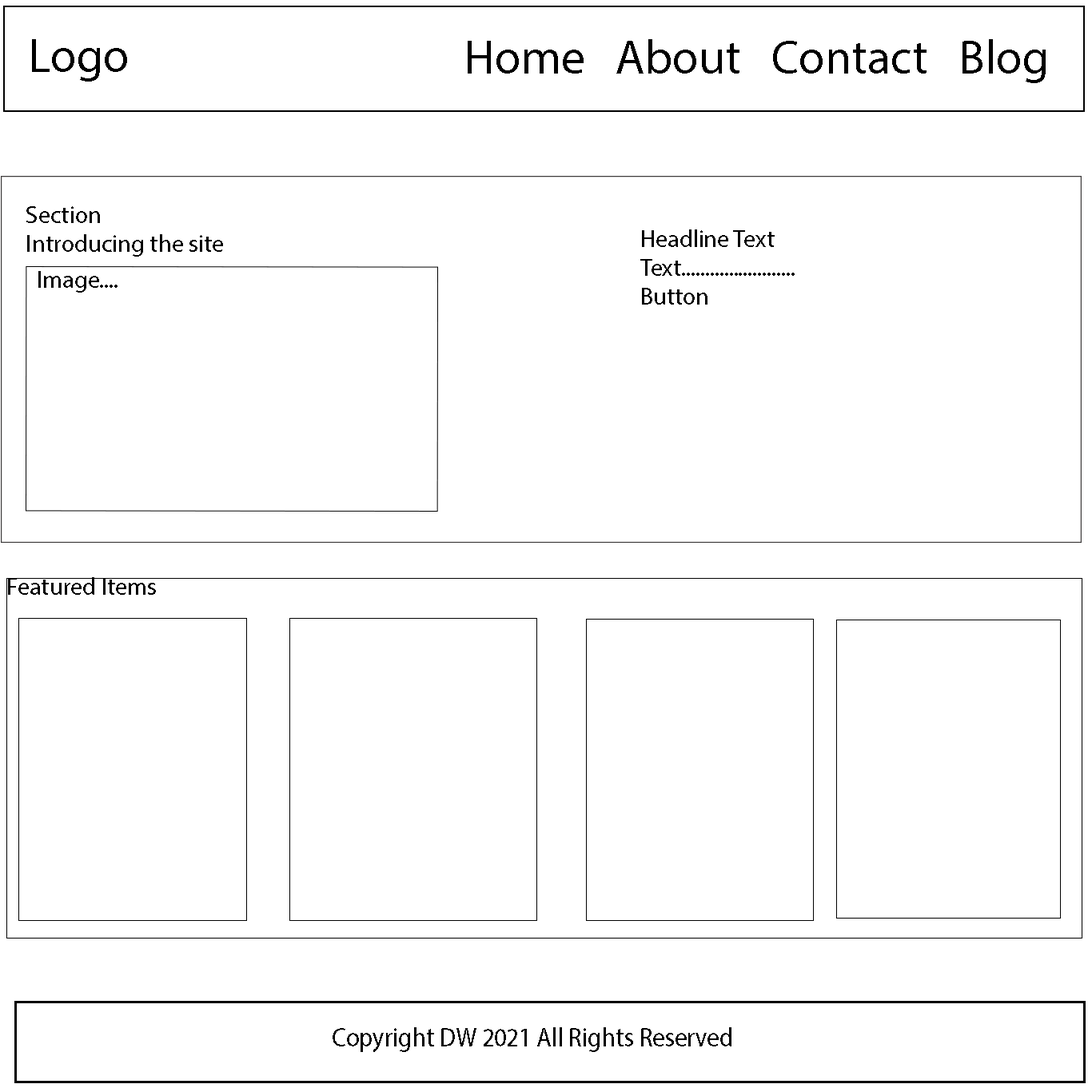
<style>
.page{position:relative;width:1092px;height:1092px;background:#ffffff}
.page>*{position:absolute;margin:0}
.t1{font:48px "MyriadPro-Regular";color:#000000}
.t2{font:24px "MyriadPro-Regular";color:#000000}
.t3{font:24.5px "MyriadPro-Regular";color:#000000}
.t4{font:27.1px "MyriadPro-Regular";color:#000000;scale:0.91 1}
</style>
<div class="page">
<p class="t1" style="left:32px;top:39px;width:95px;height:43px">Logo</p>
<p class="t1" style="left:468px;top:39px;width:578px;height:44px">Home   About   Contact   Blog</p>
<p class="t2" style="left:26px;top:206px;width:197px;height:51px">Section<br> Introducing the site</p>
<p class="t2" style="left:640px;top:229px;width:155px;height:76px">Headline Text<br>Text........................<br>Button</p>
<p class="t3" style="left:38px;top:271px;width:80px;height:22px">Image....</p>
<p class="t2" style="left:8px;top:577px;width:148px;height:18px">Featured Items</p>
<p class="t4" style="left:333px;top:1027px;width:398px;height:25px">Copyright DW 2021 All Rights Reserved</p>
</div>
